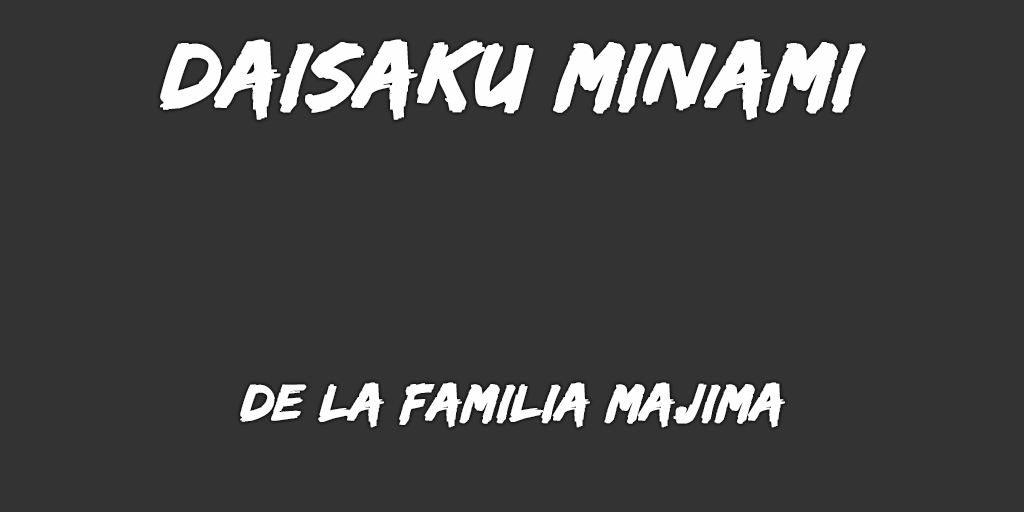
<style>
.page{position:relative;width:1024px;height:512px;background:#333333}
.page>*{position:absolute;margin:0}
.t1{font:95px "EdoSZ";color:#fefefe;font-weight:bold;font-style:italic;scale:1.04 1}
.t2{font:53px "EdoSZ";color:#fefefe;font-weight:bold;font-style:italic;scale:1.04 1}
</style>
<div class="page">
<p class="t1" style="left:160px;top:39px;width:706px;height:81px">DAISAKU MINAMI</p>
<p class="t2" style="left:240px;top:382px;width:545px;height:46px">DE LA FAMILIA MAJIMA</p>
</div>
